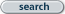
<style>
.page{position:relative;width:65px;height:14px;background:#ced3d7}
.page>*{position:absolute;margin:0}
.t1{font:10px "FrutigerBold";color:#103852}
</style>
<div class="page">
<p class="t1" style="left:19px;top:2px;width:30px;height:8px">search</p>
</div>
